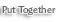
<style>
.page{position:relative;width:57px;height:22px;background:#ffffff}
.page>*{position:absolute;margin:0}
.t1{font:10px "Amira-Roman";color:#666666}
</style>
<div class="page">
<p class="t1" style="left:2px;top:5px;width:54px;height:10px">Put Together</p>
</div>
